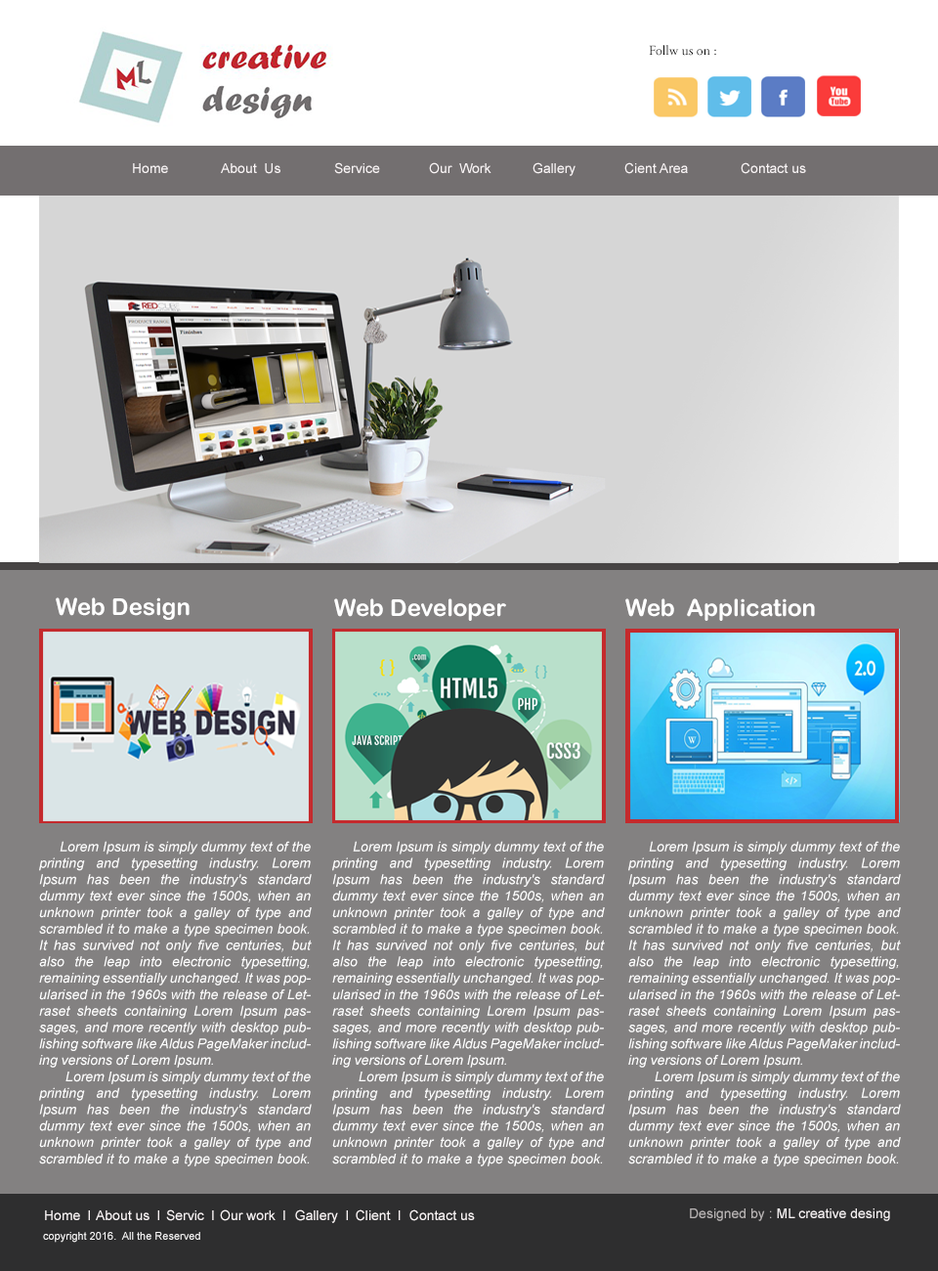
<style>
.page{position:relative;width:938px;height:1271px}
.page>*{position:absolute;margin:0}
.t1{font:13.7px "AGaramondPro-Regular";color:#050505}
.t2{font:13.7px "ArialMT";color:#f9f4f5}
.t3{font:23.5px "ArialRoundedMTBold";color:#ffffff}
.t4{font:13.7px "Arial-ItalicMT";color:#ffffff}
.t5{font:13.7px "ArialMT";color:#f5f1f2}
.t6{font:13.7px "ArialMT";color:#b7b3b3}
.t7{font:10.8px "ArialMT";color:#faf9f9}
</style>
<div class="page">
<p class="t1" style="left:649px;top:45px;width:67px;height:11px">Follw us on :</p>
<p class="t2" style="left:133px;top:163px;width:35px;height:10px">Home</p>
<p class="t2" style="left:221px;top:163px;width:60px;height:11px">About  Us</p>
<p class="t2" style="left:334px;top:162px;width:46px;height:12px">Service</p>
<p class="t2" style="left:429px;top:162px;width:63px;height:12px">Our  Work</p>
<p class="t2" style="left:533px;top:162px;width:43px;height:14px">Gallery</p>
<p class="t2" style="left:625px;top:162px;width:63px;height:12px">Cient Area</p>
<p class="t2" style="left:741px;top:162px;width:65px;height:12px">Contact us</p>
<p class="t3" style="left:56px;top:597px;width:134px;height:23px"><span class="t4"><br></span>Web Design</p>
<p class="t3" style="left:334px;top:598px;width:172px;height:23px"><span class="t4"><br></span>Web Developer</p>
<p class="t3" style="left:626px;top:598px;width:189px;height:23px"><span class="t4"><br></span>Web  Application</p>
<p class="t4" style="left:39px;top:841px;width:273px;height:325px;text-align:justify">Lorem Ipsum is simply dummy text of the printing and typesetting industry. Lorem Ipsum has been the industry's standard dummy text ever since the 1500s, when an unknown printer took a galley of type and scrambled it to make a type specimen book. It has survived not only five centuries, but also the leap into electronic typesetting, remaining essentially unchanged. It was popularised in the 1960s with the release of Letraset sheets containing Lorem Ipsum passages, and more recently with desktop publishing software like Aldus PageMaker including versions of Lorem Ipsum.<br>        Lorem Ipsum is simply dummy text of the printing and typesetting industry. Lorem Ipsum has been the industry's standard dummy text ever since the 1500s, when an unknown printer took a galley of type and scrambled it to make a type specimen book. It has survived not only five centuries, but also the leap into electronic typesetting, remaining essentially unchanged. It was popularised in the 1960s with the release of Letraset sheets containing Lorem Ipsum passages, and more recently with desktop publishing software like Aldus PageMaker including versions of Lorem Ipsum.</p>
<p class="t4" style="left:332px;top:841px;width:273px;height:325px;text-align:justify">Lorem Ipsum is simply dummy text of the printing and typesetting industry. Lorem Ipsum has been the industry's standard dummy text ever since the 1500s, when an unknown printer took a galley of type and scrambled it to make a type specimen book. It has survived not only five centuries, but also the leap into electronic typesetting, remaining essentially unchanged. It was popularised in the 1960s with the release of Letraset sheets containing Lorem Ipsum passages, and more recently with desktop publishing software like Aldus PageMaker including versions of Lorem Ipsum.<br>        Lorem Ipsum is simply dummy text of the printing and typesetting industry. Lorem Ipsum has been the industry's standard dummy text ever since the 1500s, when an unknown printer took a galley of type and scrambled it to make a type specimen book. It has survived not only five centuries, but also the leap into electronic typesetting, remaining essentially unchanged. It was popularised in the 1960s with the release of Letraset sheets containing Lorem Ipsum passages, and more recently with desktop publishing software like Aldus PageMaker including versions of Lorem Ipsum.</p>
<p class="t4" style="left:629px;top:841px;width:272px;height:325px;text-align:justify">Lorem Ipsum is simply dummy text of the printing and typesetting industry. Lorem Ipsum has been the industry's standard dummy text ever since the 1500s, when an unknown printer took a galley of type and scrambled it to make a type specimen book. It has survived not only five centuries, but also the leap into electronic typesetting, remaining essentially unchanged. It was popularised in the 1960s with the release of Letraset sheets containing Lorem Ipsum passages, and more recently with desktop publishing software like Aldus PageMaker including versions of Lorem Ipsum.<br>        Lorem Ipsum is simply dummy text of the printing and typesetting industry. Lorem Ipsum has been the industry's standard dummy text ever since the 1500s, when an unknown printer took a galley of type and scrambled it to make a type specimen book. It has survived not only five centuries, but also the leap into electronic typesetting, remaining essentially unchanged. It was popularised in the 1960s with the release of Letraset sheets containing Lorem Ipsum passages, and more recently with desktop publishing software like Aldus PageMaker including versions of Lorem Ipsum.</p>
<p class="t2" style="left:45px;top:1210px;width:45px;height:10px">Home  l</p>
<p class="t2" style="left:96px;top:1210px;width:63px;height:10px">About us  l</p>
<p class="t2" style="left:166px;top:1209px;width:48px;height:12px">Servic  l</p>
<p class="t2" style="left:220px;top:1209px;width:65px;height:12px">Our work  l</p>
<p class="t2" style="left:295px;top:1209px;width:53px;height:14px">Gallery  l</p>
<p class="t2" style="left:356px;top:1209px;width:45px;height:12px">Client  l</p>
<p class="t2" style="left:410px;top:1209px;width:65px;height:12px">Contact us</p>
<p class="t5" style="left:690px;top:1208px;width:200px;height:13px"><span class="t6">Designed by : </span>ML creative desing</p>
<p class="t7" style="left:43px;top:1232px;width:157px;height:10px">copyright 2016.  All the Reserved</p>
</div>
